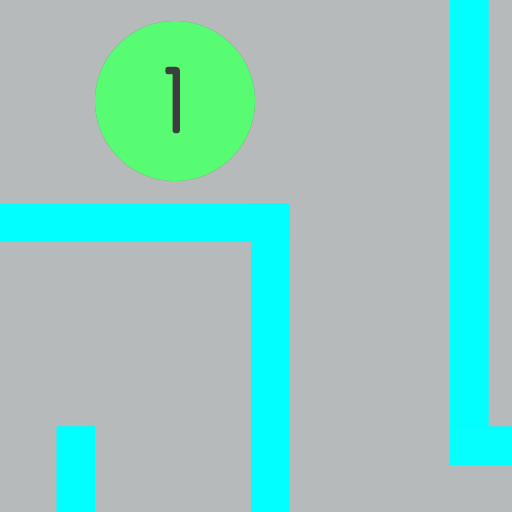
<style>
.page{position:relative;width:512px;height:512px;background:#b7baba}
.page>*{position:absolute;margin:0}
.t1{font:96px "STYuanti-SC-Regular";color:#3d3d3d}
</style>
<div class="page">
<p class="t1" style="left:165px;top:66px;width:15px;height:68px">1</p>
</div>
